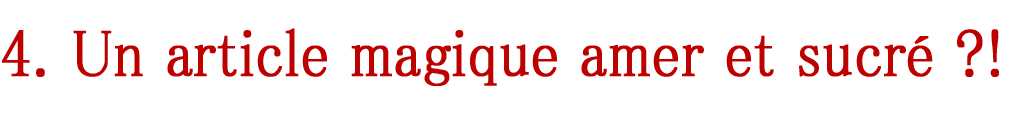
<style>
.page{position:relative;width:1009px;height:113px;background:#ffffff}
.page>*{position:absolute;margin:0}
.t1{font:66.6px "MS-PMincho";color:#bd0000;font-weight:bold;scale:0.89 1}
</style>
<div class="page">
<p class="t1" style="left:2px;top:28px;width:997px;height:58px">4. Un article magique amer et sucré ?!</p>
</div>
